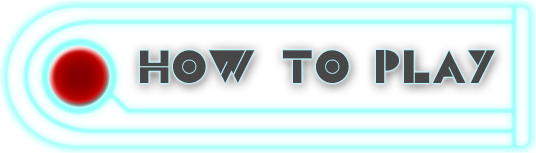
<style>
.page{position:relative;width:536px;height:153px}
.page>*{position:absolute;margin:0}
.t1{font:48px "CSBlocks";color:#474747}
</style>
<div class="page">
<p class="t1" style="left:140px;top:50px;width:355px;height:33px">how to play</p>
</div>
